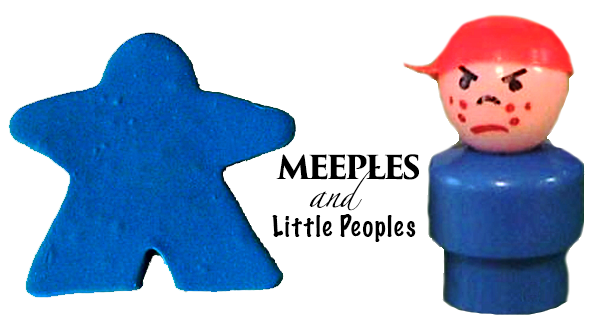
<style>
.page{position:relative;width:614px;height:326px;background:#ffffff}
.page>*{position:absolute;margin:0}
.t1{font:32px "TrajanPro3-Bold";letter-spacing:-0.08em;color:#000000}
.t2{font:24px/19px "Zapfino";letter-spacing:-0.04em;color:#000000}
.t3{font:26px "MarkerFelt-Thin";letter-spacing:0.02em;color:#000000}
</style>
<div class="page">
<p class="t1" style="left:276px;top:154px;width:143px;height:26px">MEEPLES</p>
<p class="t2" style="left:309px;top:166px;width:72px;height:45px;text-align:center">and</p>
<p class="t3" style="left:272px;top:214px;width:144px;height:28px">Little Peoples</p>
</div>
